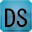
<style>
.page{position:relative;width:32px;height:32px}
.page>*{position:absolute;margin:0}
.t1{font:24px "MS-Gothic";color:#000000}
</style>
<div class="page">
<p class="t1" style="left:4px;top:8px;width:24px;height:20px">DS</p>
</div>
